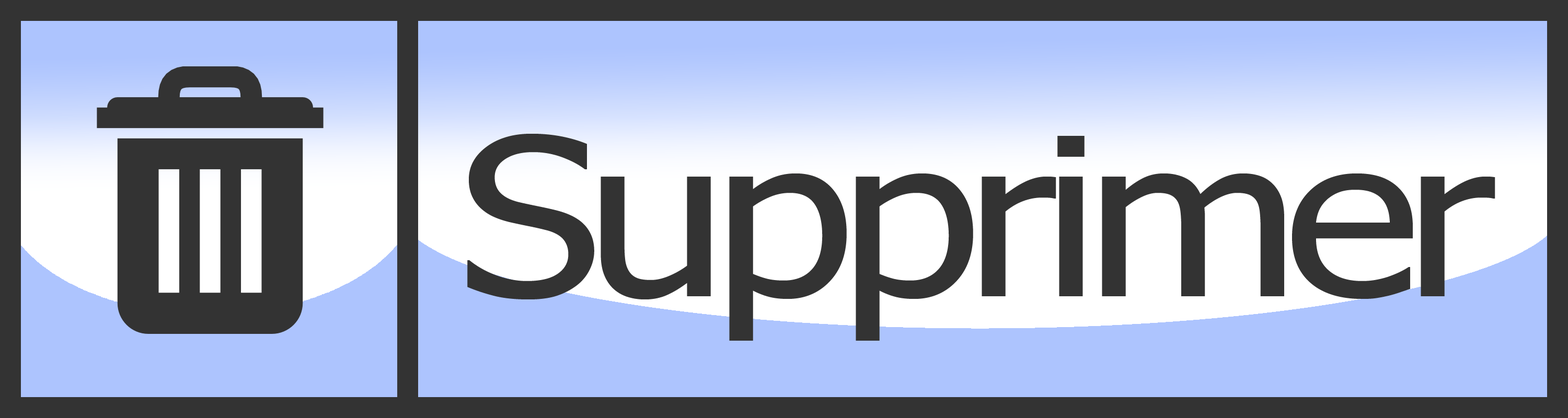
<style>
.page{position:relative;width:1568px;height:418px;background:#adc4fe}
.page>*{position:absolute;margin:0}
.t1{font:219.5px "Tahoma";letter-spacing:-0.06em;color:#333333;scale:1.17 1}
</style>
<div class="page">
<p class="t1" style="left:467px;top:134px;width:1028px;height:207px">Supprimer</p>
</div>
